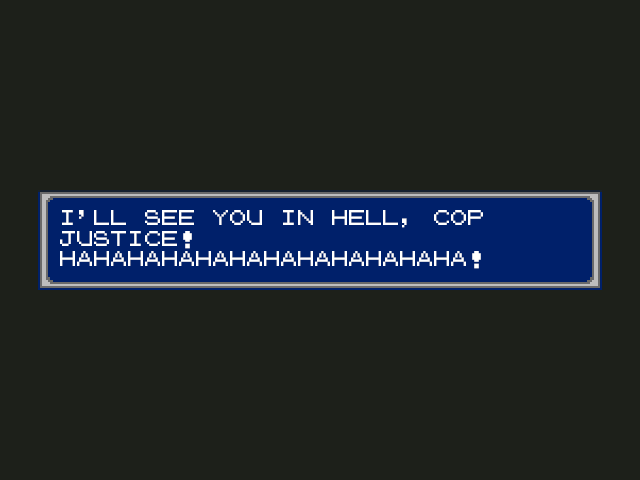
<style>
.page{position:relative;width:640px;height:480px;background:#1d201a}
.page>*{position:absolute;margin:0}
.t1{font:17px "PokemonGB";color:#ffffff}
</style>
<div class="page">
<p class="t1" style="left:60px;top:210px;width:423px;height:59px">I'LL SEE YOU IN HELL, COP JUSTICE!<br>HAHAHAHAHAHAHAHAHAHAHAHA!</p>
</div>
